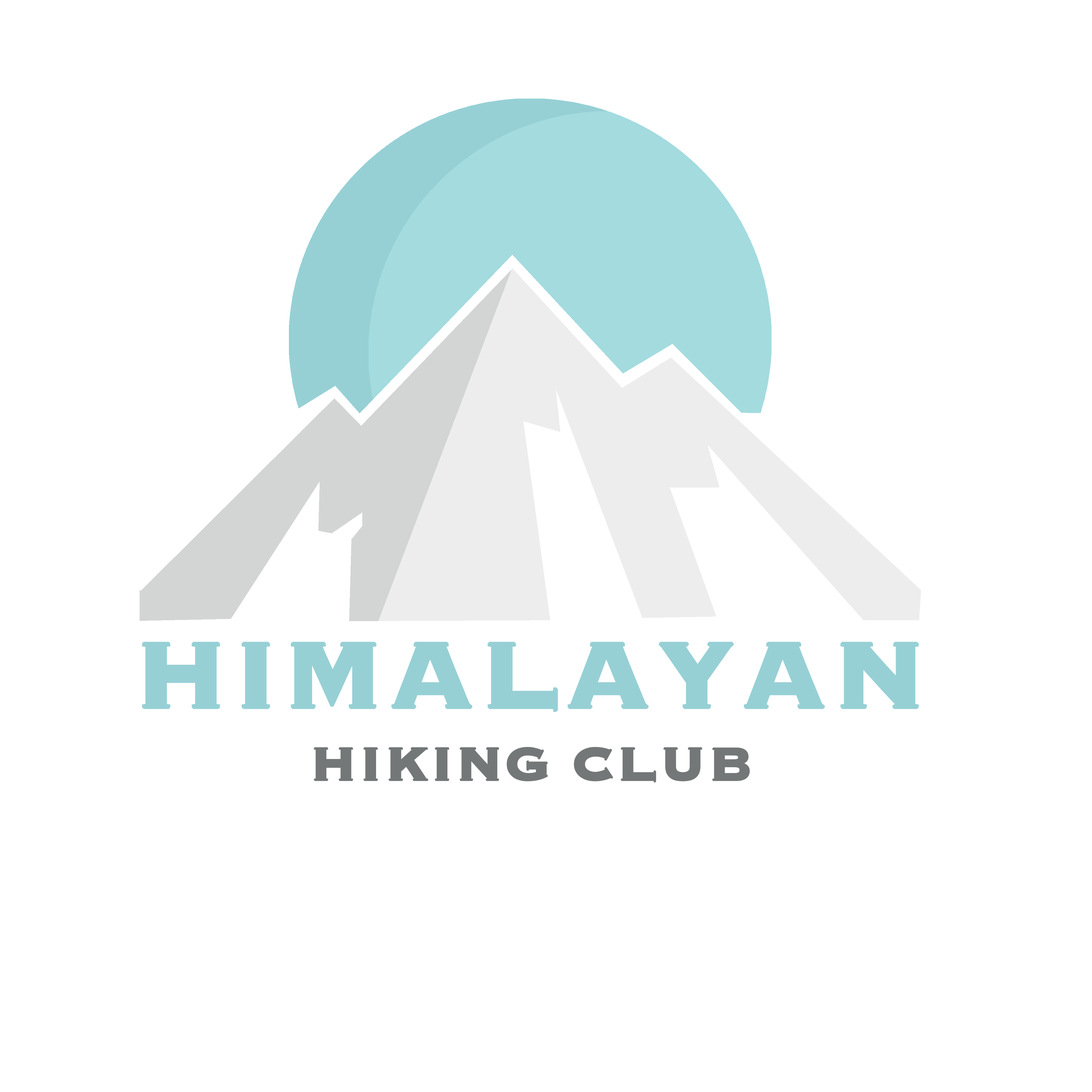
<style>
.page{position:relative;width:1092px;height:1092px;background:#ffffff}
.page>*{position:absolute;margin:0}
.t1{font:60.7px "Copperplate-Bold";letter-spacing:0.005em;color:#737777;font-weight:bold}
.t2{font:121.3px "Copperplate-Bold";letter-spacing:0.005em;color:#96d0d5;font-weight:bold}
</style>
<div class="page">
<p class="t1" style="left:142px;top:642px;width:777px;height:140px;text-align:center"><span class="t2">HIMALAYAN <br></span>HIKING CLUB</p>
</div>
